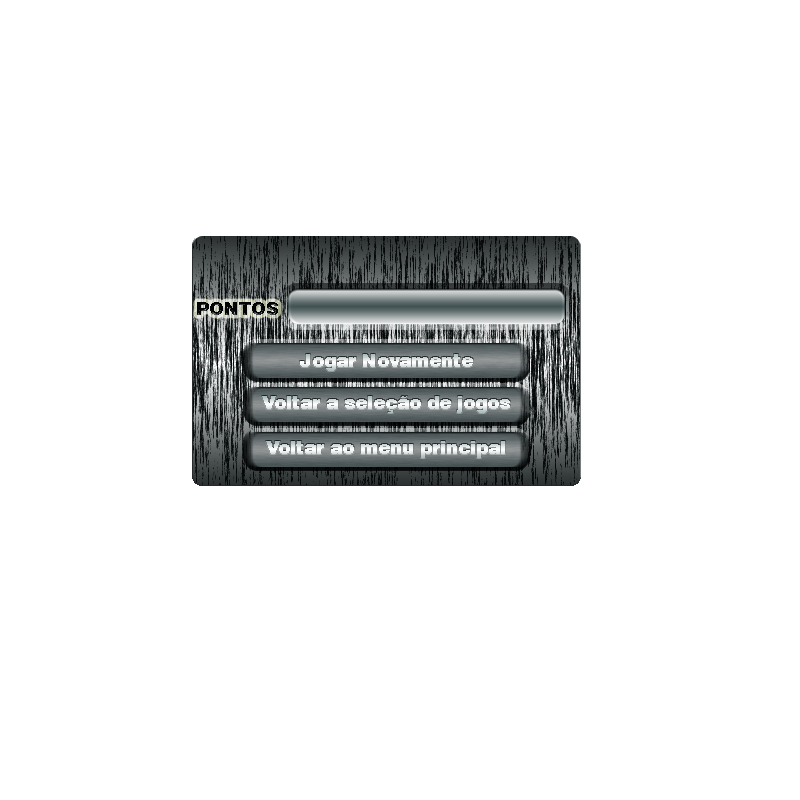
<style>
.page{position:relative;width:800px;height:800px;background:#ffffff}
.page>*{position:absolute;margin:0}
.t1{font:18px "Swiss721BT-Black";color:#060808}
.t2{font:18px "Swiss721BT-Black"}
</style>
<div class="page">
<p class="t1" style="left:197px;top:302px;width:81px;height:13px">PONTOS</p>
<p class="t2" style="left:300px;top:354px;width:173px;height:17px">Jogar Novamente</p>
<p class="t2" style="left:262px;top:396px;width:248px;height:17px">Voltar a seleção de jogos</p>
<p class="t2" style="left:266px;top:441px;width:239px;height:17px">Voltar ao menu principal</p>
</div>
